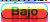
<style>
.page{position:relative;width:50px;height:22px}
.page>*{position:absolute;margin:0}
.t1{font:11px "ArialMT";font-weight:bold;scale:1.18 1}
</style>
<div class="page">
<p class="t1" style="left:11px;top:7px;width:27px;height:11px">Bajo</p>
</div>
